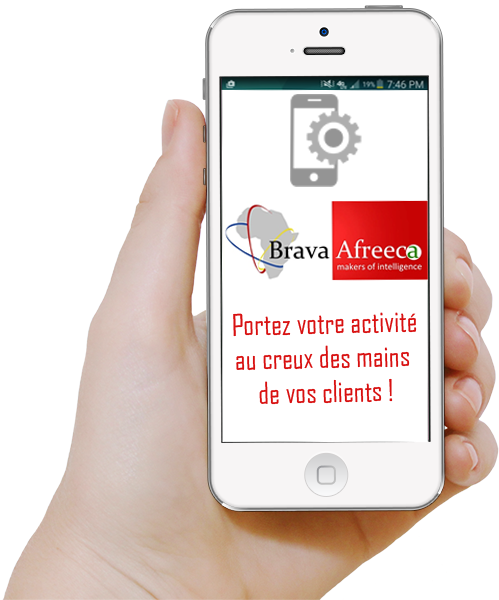
<style>
.page{position:relative;width:499px;height:600px;background:#ffffff}
.page>*{position:absolute;margin:0}
.t1{font:28.7px "AgencyFB-Reg";color:#d81010}
</style>
<div class="page">
<p class="t1" style="left:233px;top:312px;width:184px;height:93px;text-align:center;rotate:-1deg">Portez votre activité<br>au creux des mains <br>de vos clients !</p>
</div>
